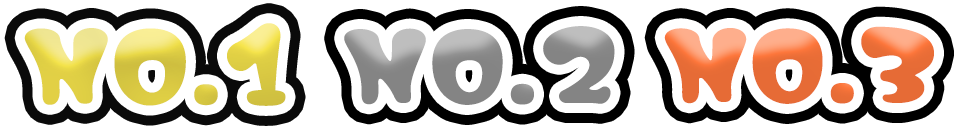
<style>
.page{position:relative;width:960px;height:128px;background:#ffffff}
.page>*{position:absolute;margin:0}
.t1{font:103.4px "Memoir-Round";letter-spacing:-0.05em;font-weight:bold}
.t2{font:101.2px "Memoir-Round";letter-spacing:-0.05em;font-weight:bold}
</style>
<div class="page">
<p class="t1" style="left:24px;top:23px;width:262px;height:83px">NO.1</p>
<p class="t2" style="left:664px;top:26px;width:270px;height:78px">NO.3</p>
</div>
